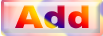
<style>
.page{position:relative;width:103px;height:36px}
.page>*{position:absolute;margin:0}
.t1{font:31.8px "Arial-Black";scale:1.12 1}
</style>
<div class="page">
<p class="t1" style="left:15px;top:5px;width:74px;height:24px">Add</p>
</div>
